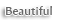
<style>
.page{position:relative;width:57px;height:22px;background:#ffffff}
.page>*{position:absolute;margin:0}
.t1{font:12px "AmiraParadiso";color:#666666}
</style>
<div class="page">
<p class="t1" style="left:6px;top:6px;width:46px;height:9px">Beautiful</p>
</div>
